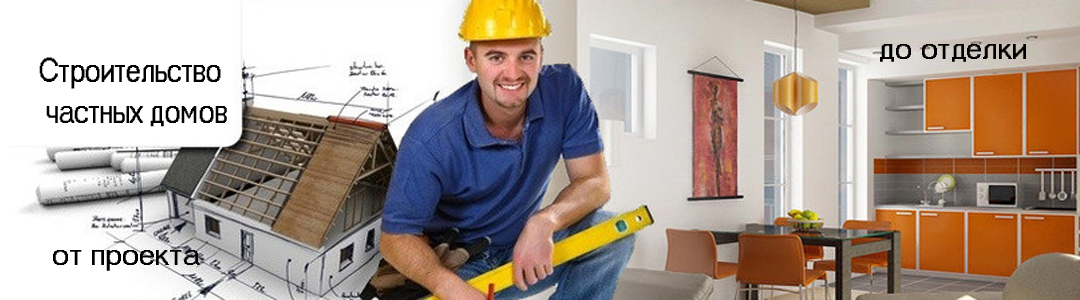
<style>
.page{position:relative;width:1080px;height:300px}
.page>*{position:absolute;margin:0}
.t1{font:30px "MS Sans Serif";color:#000000}
.t2{font:34.2px "MS Sans Serif";color:#000000;scale:0.8 1}
</style>
<div class="page">
<p class="t1" style="left:880px;top:44px;width:146px;height:18px">до отделки</p>
<p class="t2" style="left:39px;top:57px;width:188px;height:70px">Строительство<br> частных домов</p>
<p class="t1" style="left:53px;top:250px;width:147px;height:21px">от проекта</p>
</div>
